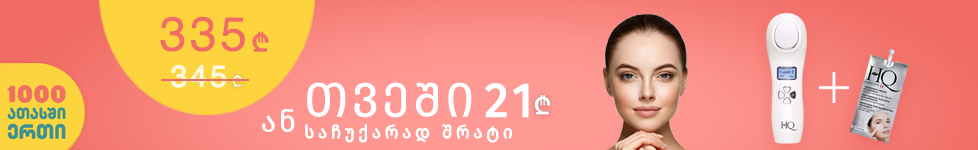
<style>
.page{position:relative;width:978px;height:150px}
.page>*{position:absolute;margin:0}
.t1{font:48px "Helvetica";letter-spacing:0.075em;color:#f06c65}
.t2{font:30px "Helvetica";letter-spacing:0.075em;color:#fff6de;font-weight:bold}
.t3{font:18px "FiraGO-Regular";letter-spacing:0.17em;color:#ffffff;font-weight:bold}
.t4{font:48px "FiraGO-Regular";letter-spacing:0.075em;color:#ffffff}
.t5{font:48px "FiraGO-Regular";letter-spacing:0.075em;color:#ffffff;font-weight:bold}
.t6{font:30px "FiraGO-Regular";letter-spacing:0.075em;color:#ffffff}
</style>
<div class="page">
<p class="t1" style="left:160px;top:16px;width:85px;height:36px">335</p>
<p class="t2" style="left:171px;top:65px;width:55px;height:23px">345</p>
<p class="t3" style="left:305px;top:82px;width:224px;height:61px"><span class="t4">თვეში </span><span class="t5">21<br></span>საჩუქარად შრატი</p>
<p class="t6" style="left:262px;top:109px;width:33px;height:23px">ან</p>
</div>
